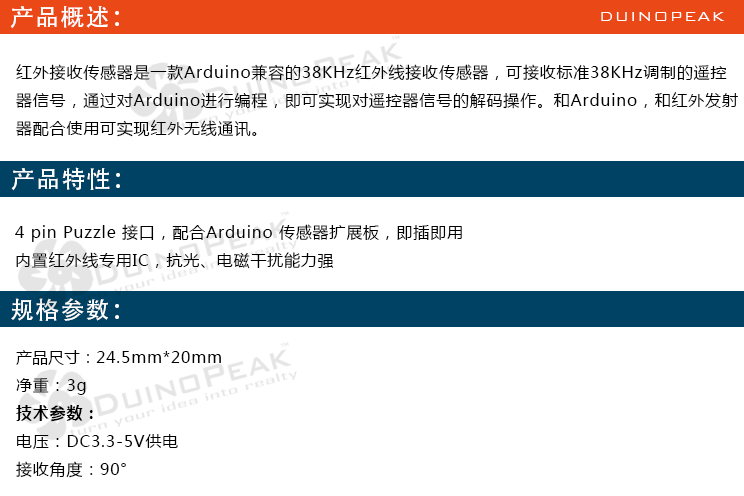
<style>
.page{position:relative;width:744px;height:496px;background:#ffffff}
.page>*{position:absolute;margin:0}
.t1{font:24px "AdobeHeitiStd-Regular";letter-spacing:0.05em;color:#ffffff}
.t2{font:18px "BankGothicBT-Light";letter-spacing:0.05em;color:#ffffff}
.t3{font:16px "MicrosoftYaHei";letter-spacing:0.05em;color:#000000}
.t4{font:16px "MicrosoftYaHei";color:#000000}
.t5{font:16px "MicrosoftYaHei-Bold";letter-spacing:0.05em;color:#000000}
</style>
<div class="page">
<p class="t1" style="left:10px;top:6px;width:109px;height:23px">产品概述：</p>
<p class="t2" style="left:601px;top:12px;width:124px;height:9px">DUINOPEAK</p>
<p class="t3" style="left:16px;top:64px;width:722px;height:73px">红外接收传感器是一款Arduino兼容的38KHz红外线接收传感器，可接收标准38KHz调制的遥控<br>器信号，通过对Arduino进行编程，即可实现对遥控器信号的解码操作。和Arduino，和红外发射<br>器配合使用可实现红外无线通讯。</p>
<p class="t1" style="left:11px;top:167px;width:109px;height:24px">产品特性：</p>
<p class="t3" style="left:15px;top:224px;width:447px;height:45px">4 pin Puzzle 接口，配合Arduino 传感器扩展板，即插即用<br>内置红外线专用IC，抗光、电磁干扰能力强</p>
<p class="t1" style="left:11px;top:298px;width:108px;height:23px">规格参数：</p>
<p class="t3" style="left:16px;top:350px;width:205px;height:128px"><span class="t4">产品尺寸：</span>24.5mm*20mm<br>净重：3g<br><span class="t5">技术参数：<br></span>电压：DC3.3-5V供电<br>接收角度：90°</p>
</div>
